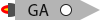
<style>
.page{position:relative;width:100px;height:20px;background:#b4b4b4}
.page>*{position:absolute;margin:0}
.t1{font:16.7px "MyriadPro-Regular";color:#151515}
</style>
<div class="page">
<p class="t1" style="left:28px;top:4px;width:21px;height:12px">GA</p>
</div>
